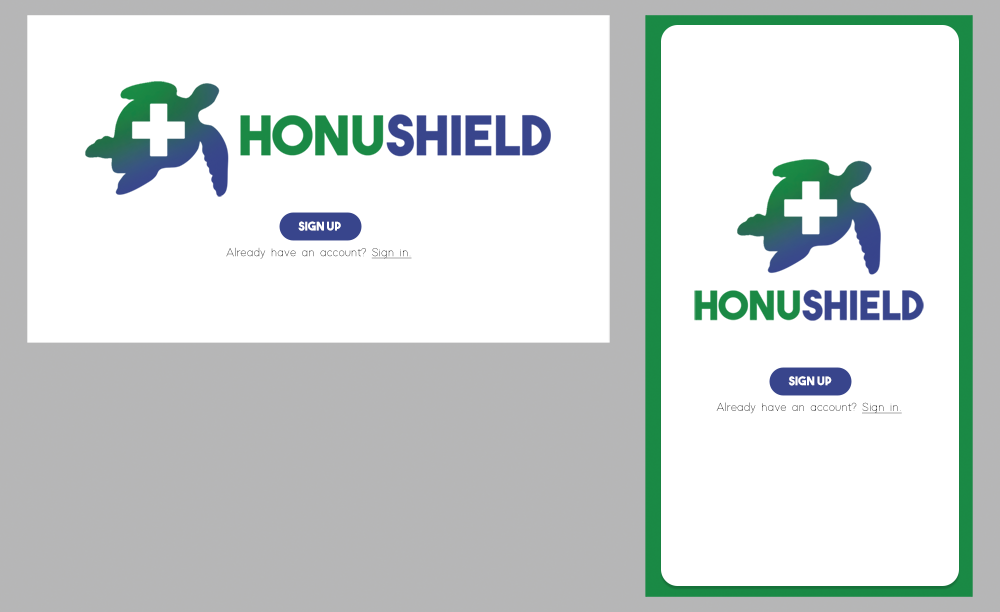
<style>
.page{position:relative;width:1000px;height:612px;background:#ffffff}
.page>*{position:absolute;margin:0}
.t1{font:12.1px "TheBoldFont";color:#ffffff}
.t2{font:12.1px "ModernSansLight"}
.t3{font:12.1px "ModernSansLight";text-decoration:underline}
</style>
<div class="page">
<p class="t1" style="left:298px;top:221px;width:43px;height:10px">SIGN UP</p>
<p class="t2" style="left:226px;top:247px;width:186px;height:12px">Already have an account? <span class="t3">Sign in.</span></p>
<p class="t1" style="left:788px;top:376px;width:44px;height:10px">SIGN UP</p>
<p class="t2" style="left:716px;top:402px;width:186px;height:12px">Already have an account? <span class="t3">Sign in.</span></p>
</div>
